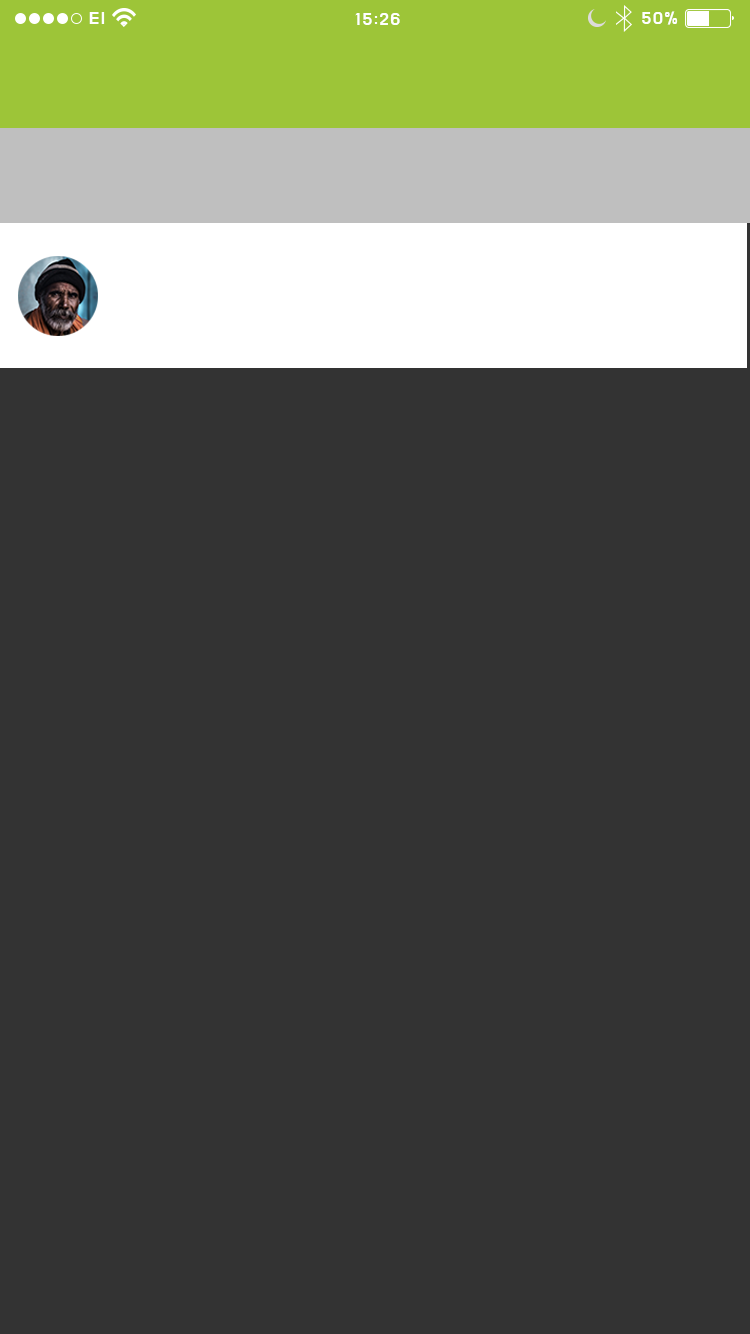
<style>
.page{position:relative;width:750px;height:1334px;background:#333333}
.page>*{position:absolute;margin:0}
.t1{font:18px "DoHyeon-Regular";letter-spacing:0.1em;color:#ffffff}
</style>
<div class="page">
<p class="t1" style="left:89px;top:12px;width:16px;height:12px">El</p>
<p class="t1" style="left:355px;top:13px;width:45px;height:12px">15:26</p>
<p class="t1" style="left:642px;top:11px;width:36px;height:14px">50%</p>
</div>
